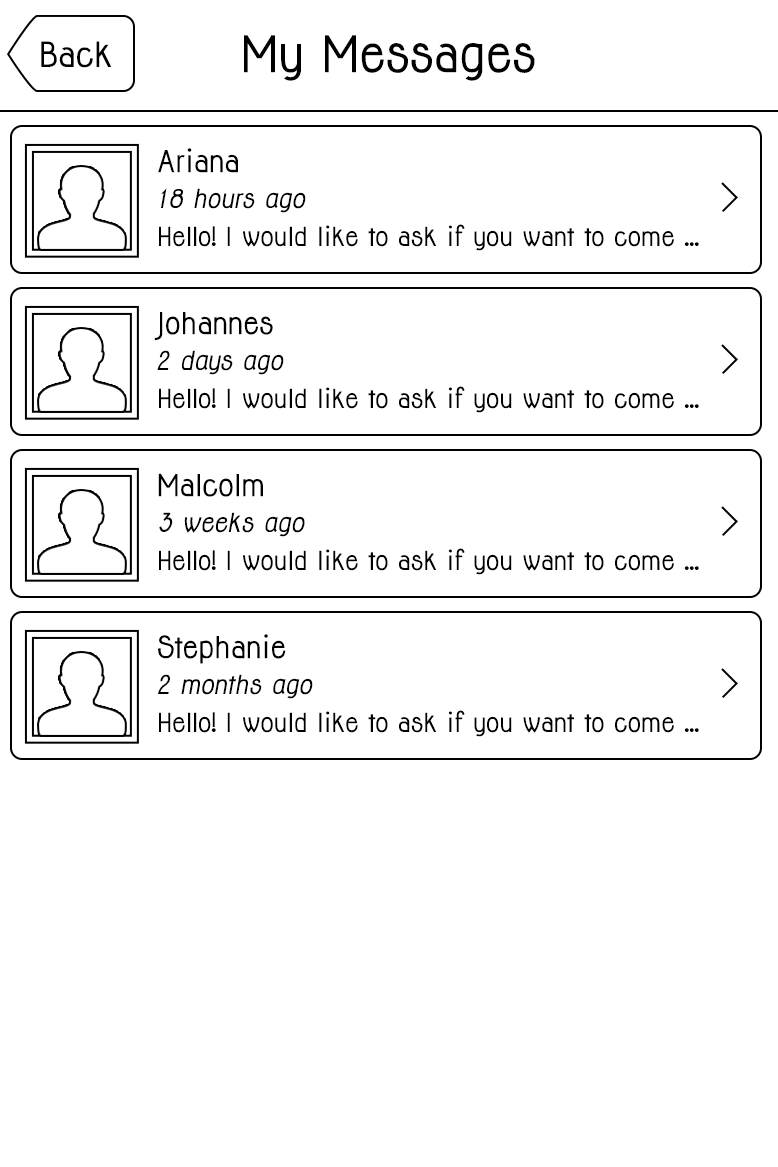
<style>
.page{position:relative;width:778px;height:1167px;background:#ffffff}
.page>*{position:absolute;margin:0}
.t1{font:32px "Jolly-Bold";color:#000000}
.t2{font:46.2px "Jolly-Bold";color:#000000}
.t3{font:27.9px "Jolly-Bold";color:#000000}
.t4{font:23.9px "Jolly-BoldItalic";color:#000000}
.t5{font:23.9px "Jolly-Bold";color:#000000}
</style>
<div class="page">
<p class="t1" style="left:41px;top:41px;width:71px;height:27px">Back</p>
<p class="t2" style="left:244px;top:35px;width:291px;height:46px">My Messages</p>
<p class="t3" style="left:158px;top:148px;width:80px;height:25px">Ariana</p>
<p class="t4" style="left:161px;top:188px;width:145px;height:25px">18 hours ago</p>
<p class="t5" style="left:159px;top:224px;width:540px;height:27px">Hello! I would like to ask if you want to come ...</p>
<p class="t3" style="left:154px;top:312px;width:119px;height:29px">Johannes</p>
<p class="t4" style="left:157px;top:350px;width:127px;height:25px">2 days ago</p>
<p class="t5" style="left:159px;top:386px;width:540px;height:27px">Hello! I would like to ask if you want to come ...</p>
<p class="t3" style="left:158px;top:473px;width:105px;height:24px">Malcolm</p>
<p class="t4" style="left:159px;top:512px;width:146px;height:25px">3 weeks ago</p>
<p class="t5" style="left:159px;top:548px;width:540px;height:27px">Hello! I would like to ask if you want to come ...</p>
<p class="t3" style="left:158px;top:634px;width:128px;height:30px">Stephanie</p>
<p class="t4" style="left:158px;top:674px;width:155px;height:25px">2 months ago</p>
<p class="t5" style="left:159px;top:710px;width:540px;height:27px">Hello! I would like to ask if you want to come ...</p>
</div>
